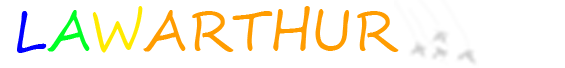
<style>
.page{position:relative;width:565px;height:68px;background:#ffffff}
.page>*{position:absolute;margin:0}
.t1{font:55.1px "SegoeScript";color:#ff9c00;scale:0.94 1}
.t2{font:55.1px "SegoeScript";color:#0000ff;scale:0.94 1}
.t3{font:55.1px "SegoeScript";color:#00ff24;scale:0.94 1}
.t4{font:55.1px "SegoeScript";color:#ffea00;scale:0.94 1}
</style>
<div class="page">
<p class="t1" style="left:17px;top:6px;width:382px;height:47px"><span class="t2">L</span><span class="t3">A</span><span class="t4">W</span>ARTHUR</p>
</div>
